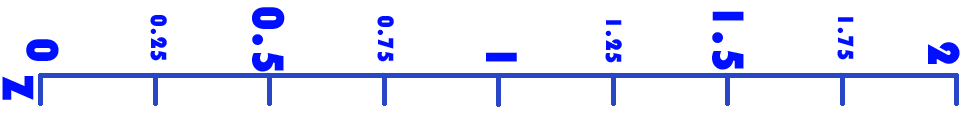
<style>
.page{position:relative;width:960px;height:120px;background:#ffffff}
.page>*{position:absolute;margin:0}
.t1{font:23px "Bauhaus93";color:#000fff}
.t2{font:46px "Bauhaus93";color:#000fff}
</style>
<div class="page">
<p class="t1" style="left:150px;top:15px;width:17px;height:46px;rotate:90deg">0.25</p>
<p class="t2" style="left:252px;top:7px;width:33px;height:65px;rotate:90deg">0.5</p>
<p class="t1" style="left:377px;top:16px;width:17px;height:46px;rotate:90deg">0.75</p>
<p class="t2" style="left:712px;top:11px;width:32px;height:59px;rotate:90deg">1.5</p>
<p class="t1" style="left:837px;top:17px;width:17px;height:43px;rotate:90deg">1.75</p>
<p class="t1" style="left:605px;top:20px;width:17px;height:43px;rotate:90deg">1.25</p>
<p class="t2" style="left:26px;top:39px;width:33px;height:22px;rotate:90deg">0</p>
<p class="t2" style="left:486px;top:52px;width:31px;height:10px;rotate:90deg">1</p>
<p class="t2" style="left:928px;top:42px;width:32px;height:22px;rotate:90deg">2</p>
<p class="t2" style="left:2px;top:76px;width:32px;height:24px;rotate:90deg">Z</p>
</div>
